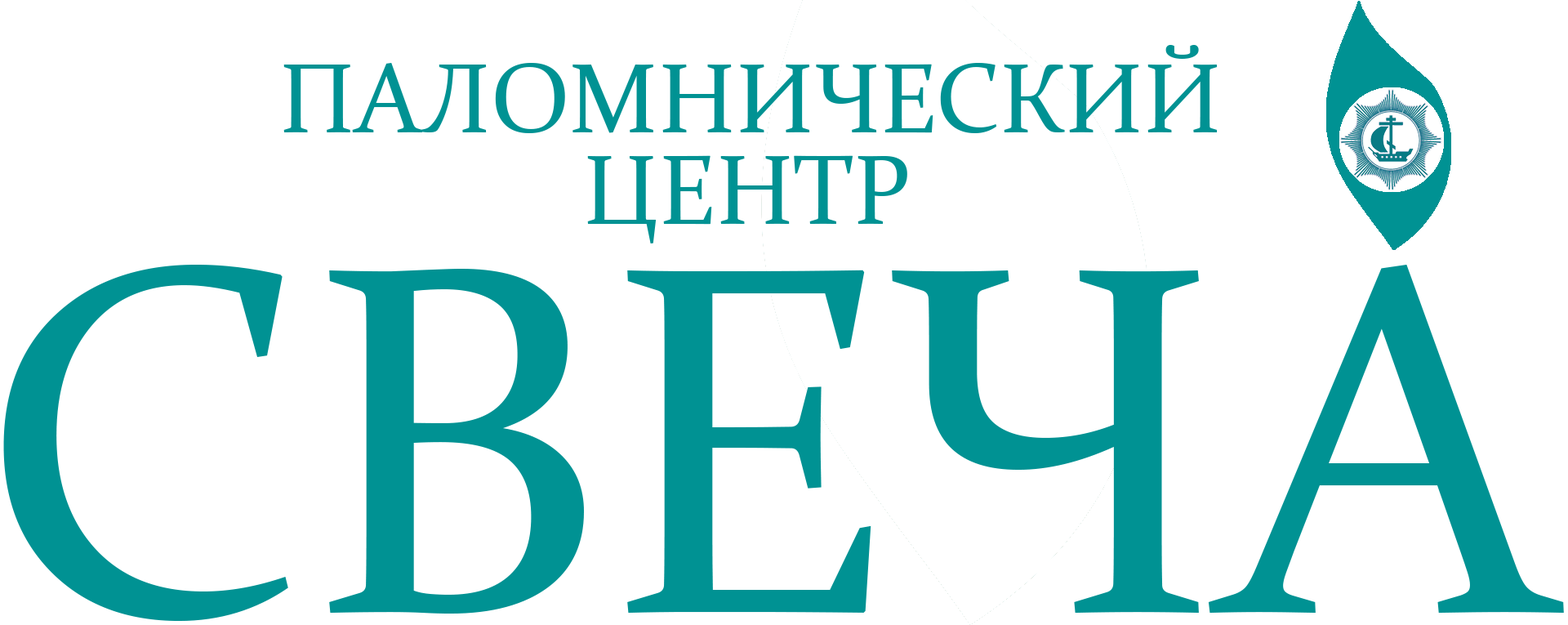
<style>
.page{position:relative;width:1568px;height:625px;background:#ffffff}
.page>*{position:absolute;margin:0}
.t1{font:98px "Constantia";color:#009293}
.t2{font:499.8px "Constantia";color:#009293}
</style>
<div class="page">
<p class="t1" style="left:283px;top:45px;width:935px;height:88px">ПАЛОМНИЧЕСКИЙ</p>
<p class="t1" style="left:587px;top:155px;width:320px;height:88px">ЦЕНТР</p>
<p class="t2" style="left:3px;top:265px;width:1561px;height:356px">СВЕЧА</p>
</div>
